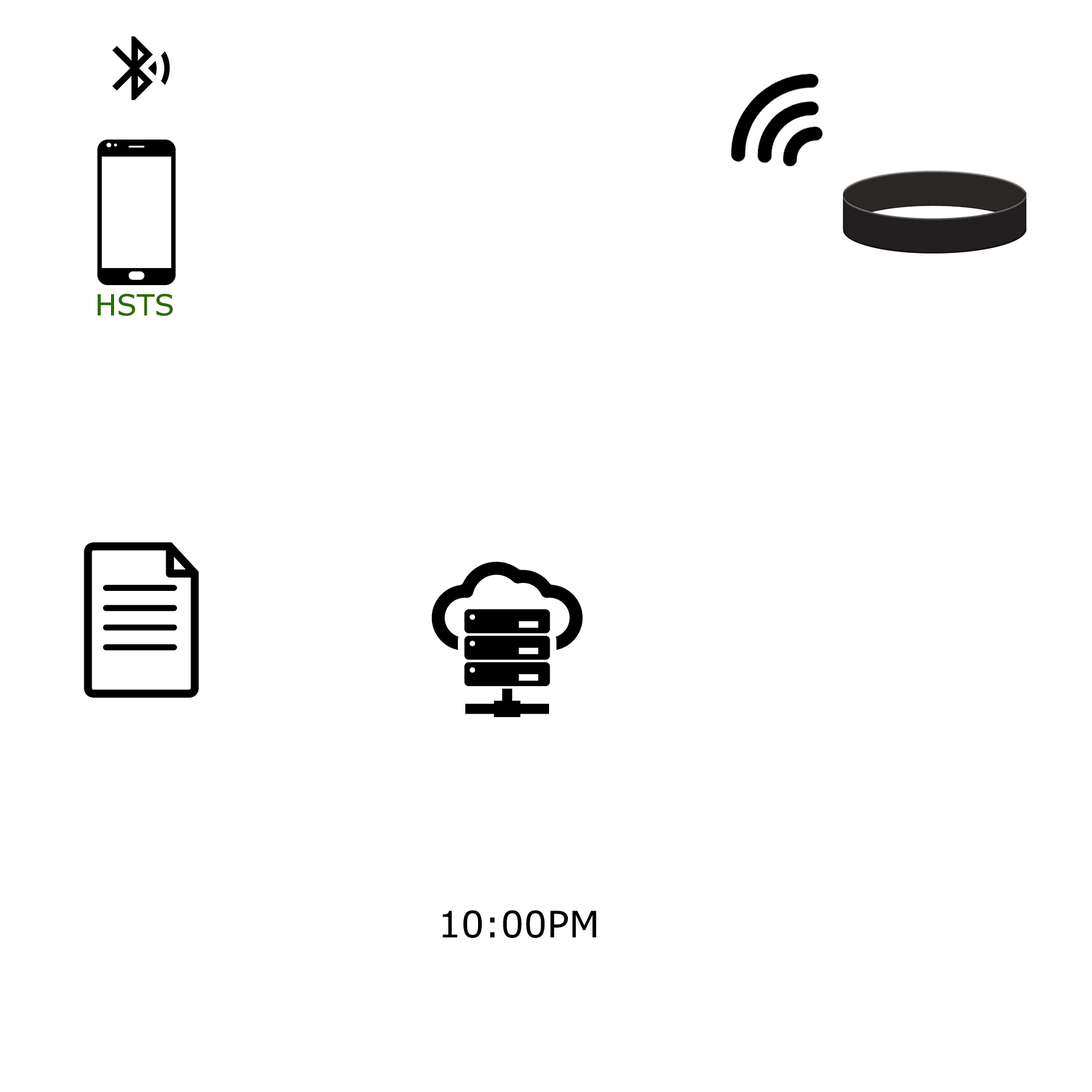
<style>
.page{position:relative;width:1092px;height:1092px;background:#ffffff}
.page>*{position:absolute;margin:0}
.t1{font:29.1px "MSReferenceSansSerif";color:#2a6d00}
.t2{font:36.4px "MSReferenceSansSerif";color:#000000}
</style>
<div class="page">
<p class="t1" style="left:98px;top:294px;width:75px;height:22px">HSTS</p>
<p class="t2" style="left:442px;top:910px;width:154px;height:28px">10:00PM</p>
</div>
